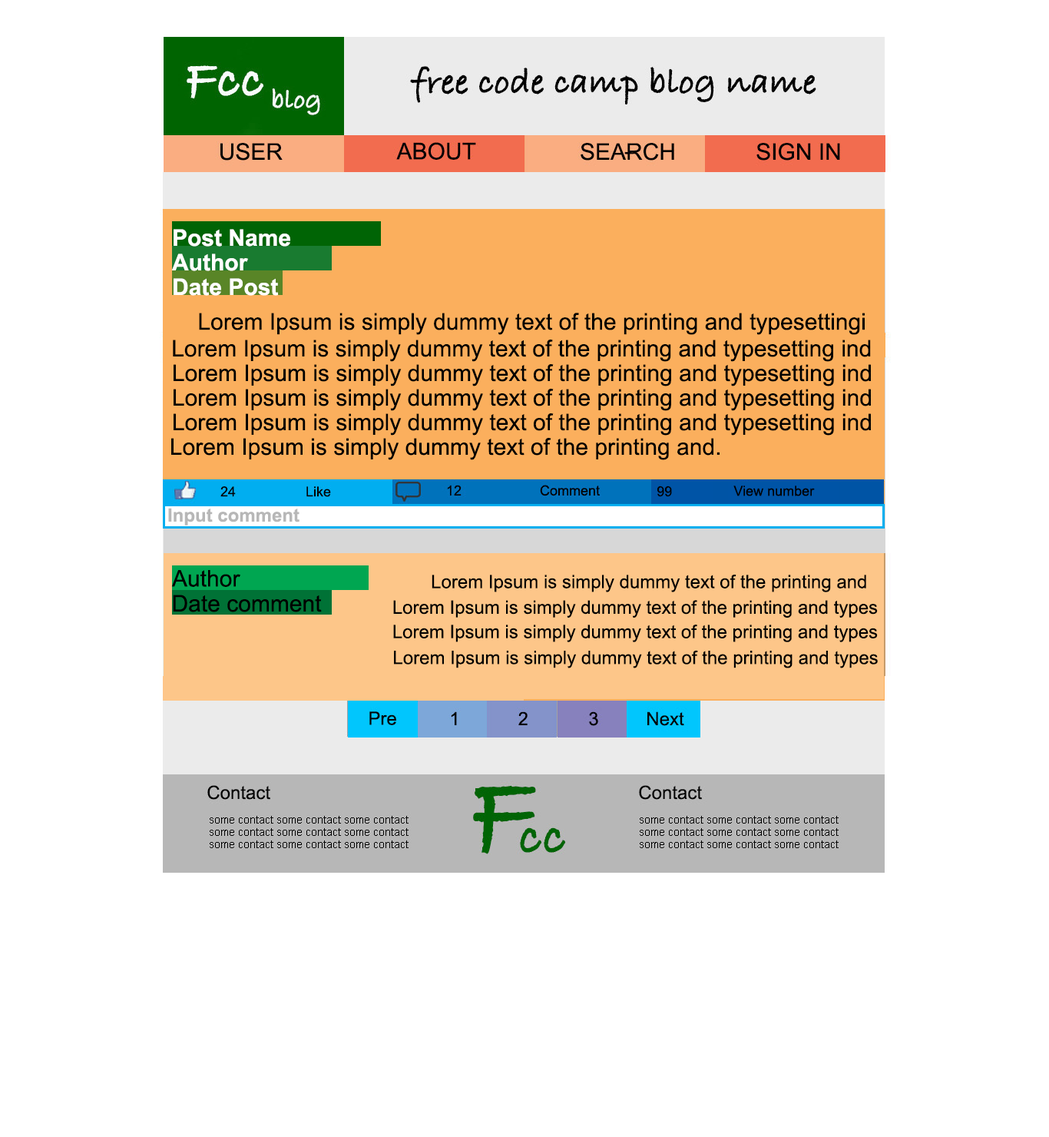
<style>
.page{position:relative;width:1049px;height:1137px;background:#ffffff}
.page>*{position:absolute;margin:0}
.t1{font:23px "Arial-BoldMT";color:#ffffff}
.t2{font:23px "ArialMT";color:#000000}
.t3{font:13.8px "ArialMT";color:#000000}
.t4{font:18.4px "Arial-BoldMT";color:#b7b7b7}
.t5{font:18.4px "ArialMT";color:#000000}
</style>
<div class="page">
<p class="t1" style="left:174px;top:229px;width:116px;height:18px">Post Name</p>
<p class="t1" style="left:172px;top:253px;width:76px;height:18px">Author</p>
<p class="t1" style="left:174px;top:278px;width:105px;height:18px">Date Post</p>
<p class="t2" style="left:199px;top:313px;width:666px;height:22px">Lorem Ipsum is simply dummy text of the printing and typesettingi</p>
<p class="t2" style="left:173px;top:339px;width:698px;height:23px">Lorem Ipsum is simply dummy text of the printing and typesetting ind</p>
<p class="t2" style="left:174px;top:364px;width:697px;height:22px">Lorem Ipsum is simply dummy text of the printing and typesetting ind</p>
<p class="t2" style="left:174px;top:389px;width:697px;height:22px">Lorem Ipsum is simply dummy text of the printing and typesetting ind</p>
<p class="t2" style="left:174px;top:413px;width:697px;height:22px">Lorem Ipsum is simply dummy text of the printing and typesetting ind</p>
<p class="t2" style="left:171px;top:438px;width:549px;height:22px">Lorem Ipsum is simply dummy text of the printing and.</p>
<p class="t3" style="left:657px;top:485px;width:15px;height:12px">99</p>
<p class="t3" style="left:733px;top:485px;width:82px;height:11px">View number</p>
<p class="t4" style="left:168px;top:508px;width:132px;height:17px">Input comment</p>
<p class="t2" style="left:171px;top:570px;width:69px;height:17px">Author</p>
<p class="t5" style="left:432px;top:574px;width:434px;height:18px">Lorem Ipsum is simply dummy text of the printing and</p>
<p class="t2" style="left:173px;top:594px;width:149px;height:18px">Date comment</p>
<p class="t5" style="left:393px;top:600px;width:485px;height:17px">Lorem Ipsum is simply dummy text of the printing and types</p>
<p class="t5" style="left:393px;top:624px;width:485px;height:18px">Lorem Ipsum is simply dummy text of the printing and types</p>
<p class="t5" style="left:394px;top:650px;width:484px;height:18px">Lorem Ipsum is simply dummy text of the printing and types</p>
</div>
